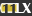
<style>
.page{position:relative;width:32px;height:16px;background:#333333}
.page>*{position:absolute;margin:0}
.t1{font:15px "BritannicBold";color:#ffffff}
</style>
<div class="page">
<p class="t1" style="left:15px;top:3px;width:17px;height:10px">LX</p>
</div>
